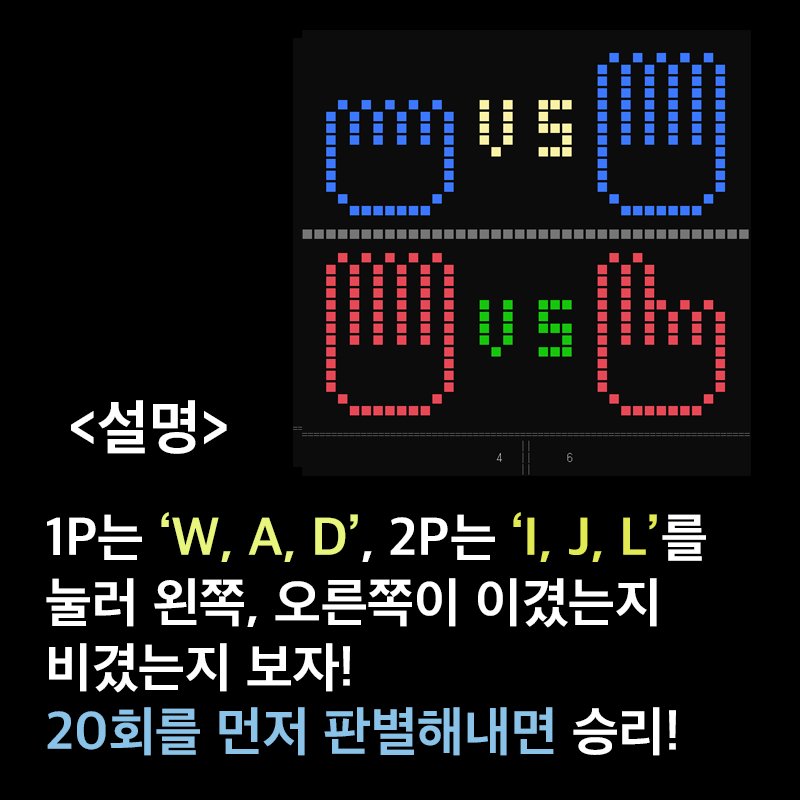
<style>
.page{position:relative;width:800px;height:800px;background:#000000}
.page>*{position:absolute;margin:0}
.t1{font:60px "AppleSDGothicNeoB00";color:#ffffff}
.t2{font:54px "AppleSDGothicNeoB00";color:#ffffff}
.t3{font:54px "AppleSDGothicNeoB00";color:#e9f67e}
.t4{font:54px "AppleSDGothicNeoB00";color:#e1ea52}
.t5{font:54px "AppleSDGothicNeoB00";color:#8ac3e7}
</style>
<div class="page">
<p class="t1" style="left:71px;top:400px;width:156px;height:54px">&lt;설명&gt;</p>
<p class="t2" style="left:46px;top:512px;width:660px;height:244px">1P는 <span class="t3">‘W, A, D’</span>, 2P는 <span class="t4">‘I, J, L’</span>를 <br>눌러 왼쪽, 오른쪽이 이겼는지 <br>비겼는지 보자!<br><span class="t5">20회를 먼저 판별해내면</span> 승리!</p>
</div>
